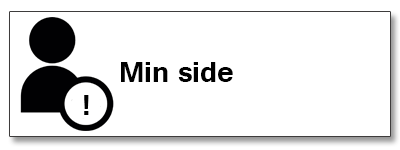
<style>
.page{position:relative;width:400px;height:150px;background:#ffffff}
.page>*{position:absolute;margin:0}
.t1{font:36px "Tunga-Bold";color:#000000}
</style>
<div class="page">
<p class="t1" style="left:121px;top:62px;width:112px;height:20px">Min side</p>
<p class="t1" style="left:84px;top:95px;width:5px;height:20px">!</p>
</div>
